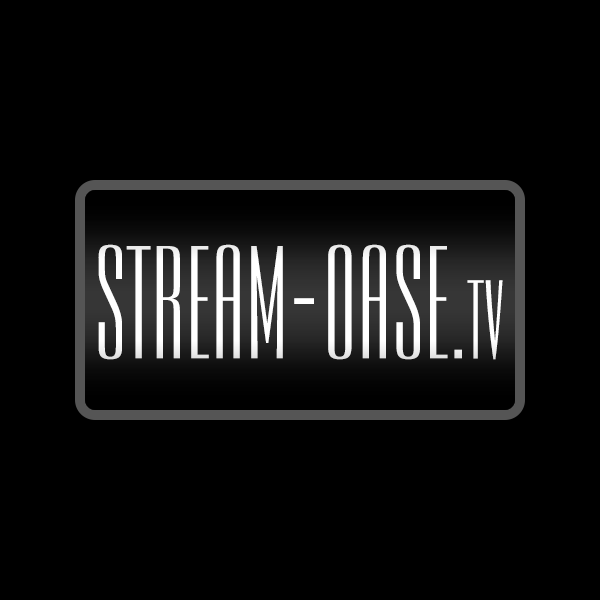
<style>
.page{position:relative;width:600px;height:600px;background:#000000}
.page>*{position:absolute;margin:0}
.t1{font:156.2px "EmpireBT-Regular";color:#ffffff}
.t2{font:108.7px "EmpireBT-Regular";color:#ffffff}
</style>
<div class="page">
<p class="t1" style="left:98px;top:244px;width:364px;height:116px">STREAM-OASE.</p>
<p class="t2" style="left:467px;top:280px;width:36px;height:80px">TV</p>
</div>
